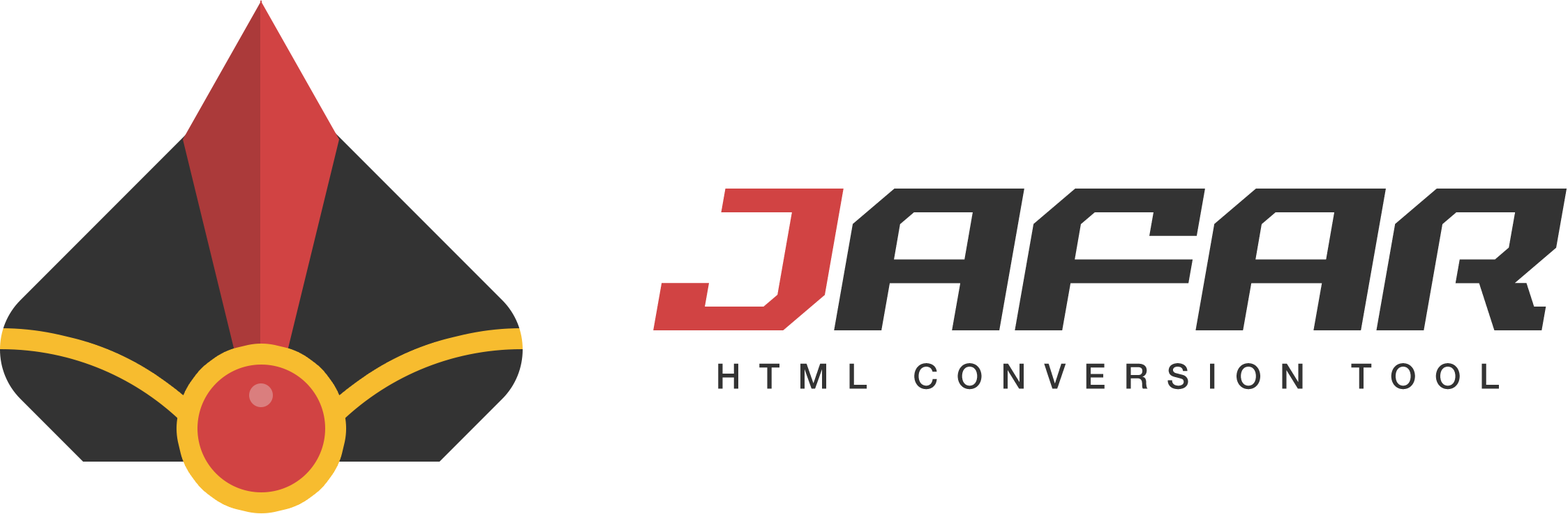
<style>
.page{position:relative;width:1568px;height:514px;background:#ffffff}
.page>*{position:absolute;margin:0}
.t1{font:245.6px "RealityHyperRegular";color:#333333}
.t2{font:245.6px "RealityHyperRegular";color:#d14343}
.t3{font:34.9px "HelveticaNeueLTPro-Md";letter-spacing:0.52em;color:#333333}
</style>
<div class="page">
<p class="t1" style="left:653px;top:188px;width:914px;height:142px"><span class="t2">J</span>AFAR</p>
<p class="t3" style="left:718px;top:363px;width:781px;height:26px">HTML CONVERSION TOOL</p>
</div>
